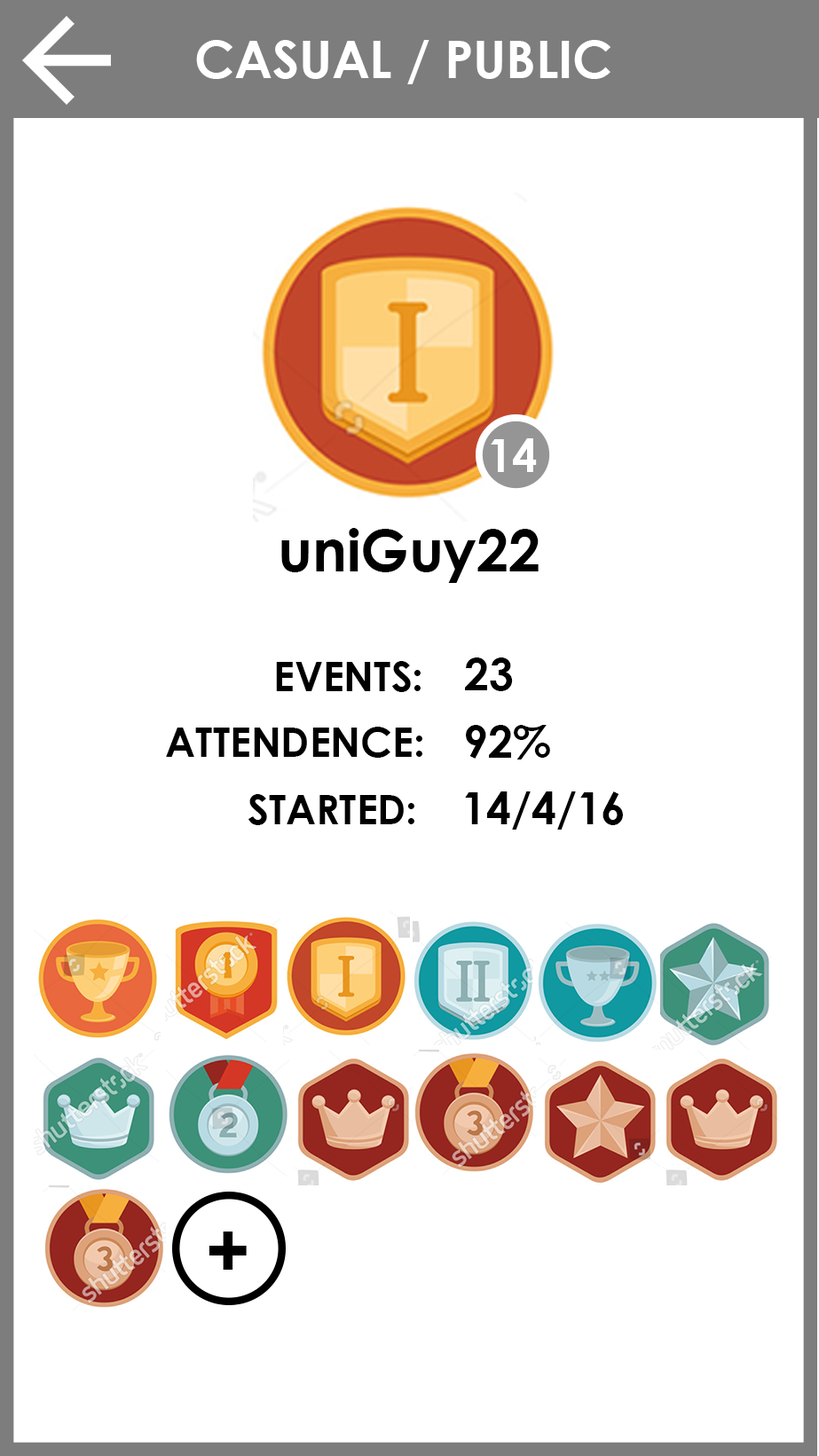
<style>
.page{position:relative;width:819px;height:1456px;background:#ffffff}
.page>*{position:absolute;margin:0}
.t1{font:51.3px "CenturyGothic-Bold";color:#ffffff}
.t2{font:45.1px "CenturyGothic-Bold";color:#ffffff}
.t3{font:57.5px "CenturyGothic-Bold";color:#000000}
.t4{font:40.6px "CenturyGothic-Bold";color:#000000}
.t5{font:44.2px "CenturyGothic-Bold";color:#000000}
.t6{font:76.1px "CenturyGothic-Bold";color:#000000}
</style>
<div class="page">
<p class="t1" style="left:196px;top:40px;width:414px;height:44px">CASUAL / PUBLIC</p>
<p class="t2" style="left:491px;top:438px;width:46px;height:34px">14</p>
<p class="t3" style="left:281px;top:528px;width:258px;height:55px">uniGuy22</p>
<p class="t4" style="left:276px;top:661px;width:145px;height:31px">EVENTS:</p>
<p class="t5" style="left:465px;top:657px;width:48px;height:34px">23</p>
<p class="t5" style="left:466px;top:725px;width:84px;height:35px">92%</p>
<p class="t4" style="left:166px;top:727px;width:256px;height:31px">ATTENDENCE:</p>
<p class="t4" style="left:248px;top:794px;width:166px;height:31px">STARTED:</p>
<p class="t5" style="left:465px;top:791px;width:158px;height:39px">14/4/16</p>
<p class="t6" style="left:209px;top:1232px;width:38px;height:38px">+</p>
</div>
